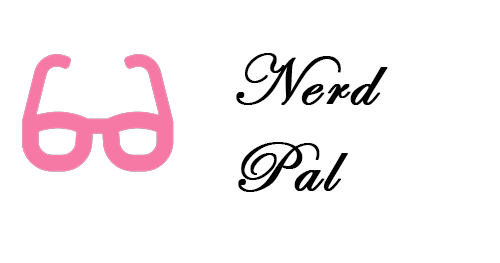
<style>
.page{position:relative;width:500px;height:263px;background:#ffffff}
.page>*{position:absolute;margin:0}
.t1{font:72px "EdwardianScriptITC";letter-spacing:0.05em;color:#000000;font-weight:bold}
</style>
<div class="page">
<p class="t1" style="left:236px;top:53px;width:152px;height:139px">Nerd<br>Pal</p>
</div>
